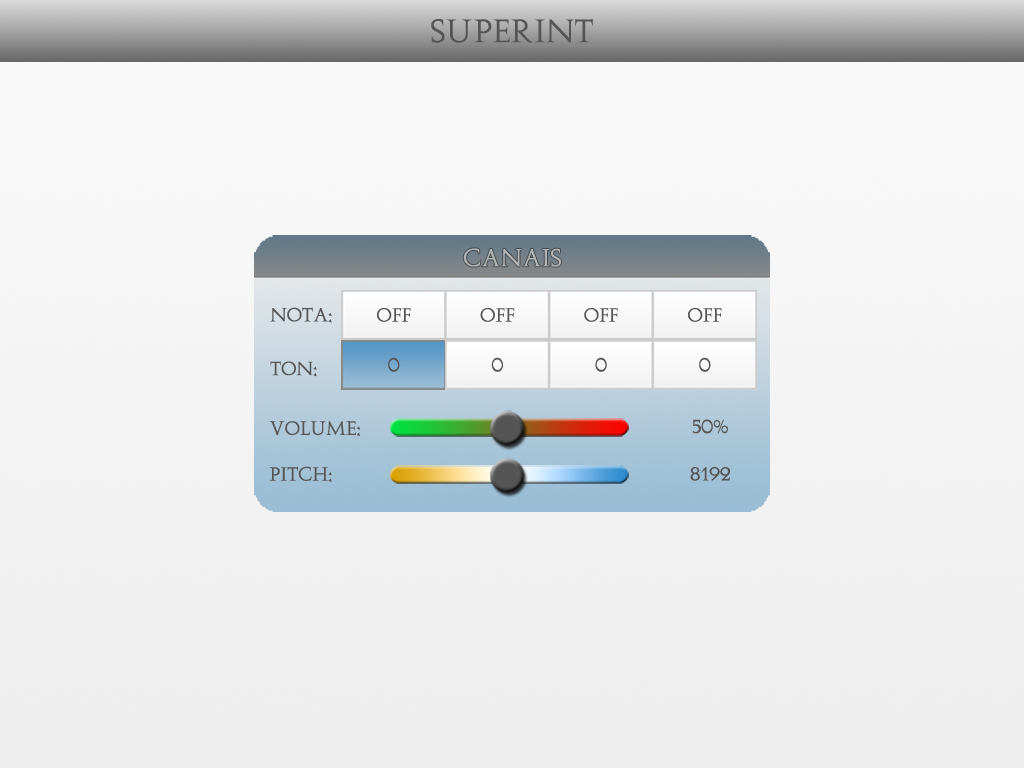
<style>
.page{position:relative;width:1024px;height:768px}
.page>*{position:absolute;margin:0}
.t1{font:30.7px "Augustus";color:#565555}
.t2{font:23px "Augustus";color:#b4b4b4}
.t3{font:17.9px "Augustus";color:#565555}
</style>
<div class="page">
<p class="t1" style="left:431px;top:18px;width:162px;height:25px">SuperINT</p>
<p class="t2" style="left:463px;top:248px;width:98px;height:19px">Canais</p>
<p class="t3" style="left:270px;top:307px;width:62px;height:16px">Nota:</p>
<p class="t3" style="left:377px;top:308px;width:34px;height:14px">OFF</p>
<p class="t3" style="left:480px;top:308px;width:35px;height:14px">OFF</p>
<p class="t3" style="left:584px;top:308px;width:34px;height:14px">OFF</p>
<p class="t3" style="left:688px;top:308px;width:34px;height:14px">OFF</p>
<p class="t3" style="left:270px;top:361px;width:47px;height:16px">tOn:</p>
<p class="t3" style="left:388px;top:357px;width:12px;height:15px">0</p>
<p class="t3" style="left:491px;top:357px;width:12px;height:15px">0</p>
<p class="t3" style="left:595px;top:357px;width:12px;height:15px">0</p>
<p class="t3" style="left:699px;top:357px;width:12px;height:15px">0</p>
<p class="t3" style="left:270px;top:421px;width:90px;height:15px">VolumE:</p>
<p class="t3" style="left:692px;top:419px;width:36px;height:15px">50%</p>
<p class="t3" style="left:269px;top:466px;width:63px;height:16px">PITCH:</p>
<p class="t3" style="left:690px;top:467px;width:41px;height:14px">8192</p>
</div>
